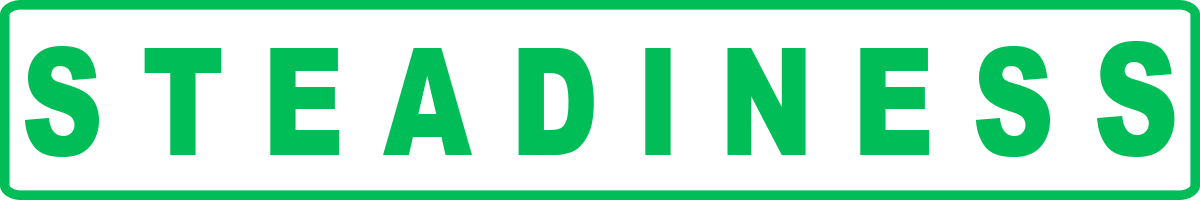
<style>
.page{position:relative;width:1200px;height:200px;background:#ffffff}
.page>*{position:absolute;margin:0}
.t1{font:149.4px "Arial-Black";color:#00bd58;scale:0.76 1}
.t2{font:155.6px "Arial-Black";color:#00bd58;scale:0.76 1}
</style>
<div class="page">
<p class="t1" style="left:24px;top:41px;width:1151px;height:116px">S T E A D I N E S <span class="t2">S</span></p>
</div>
